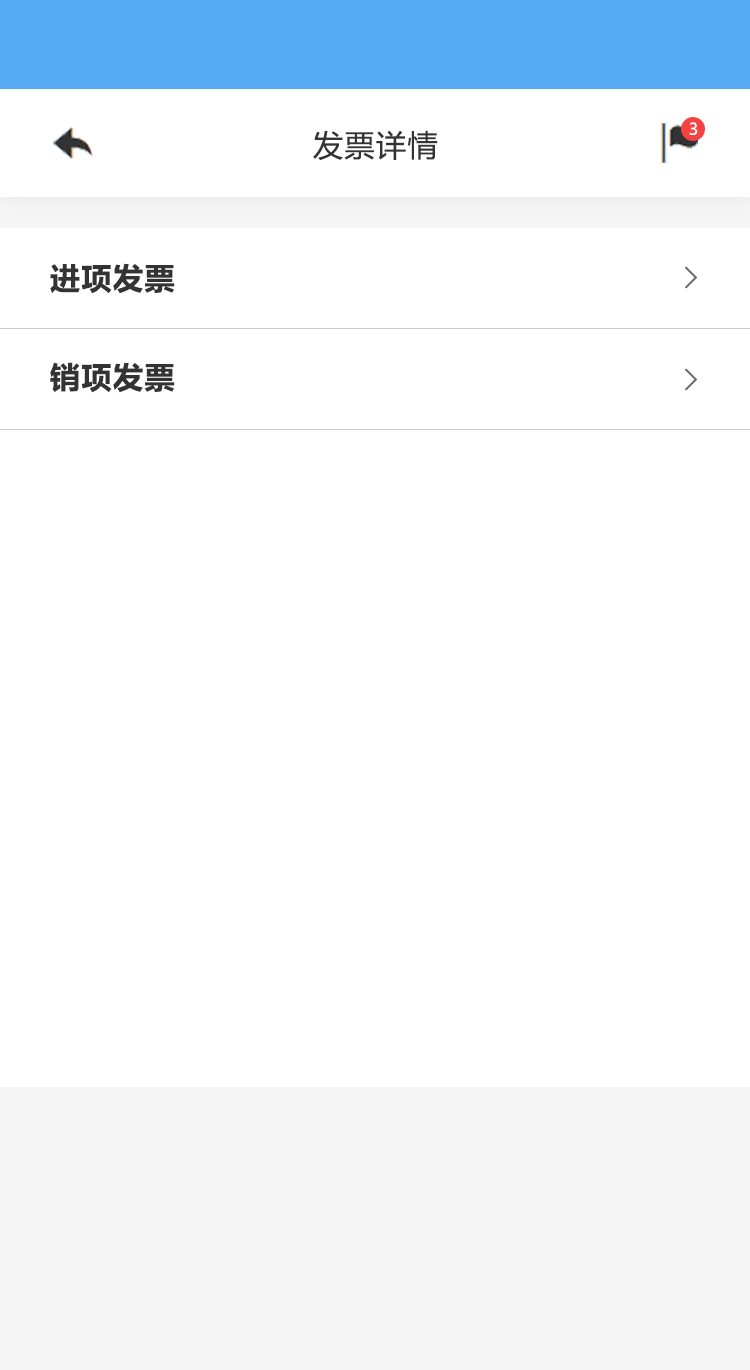
<style>
.page{position:relative;width:750px;height:1370px;background:#ffffff}
.page>*{position:absolute;margin:0}
.t1{font:16px "MicrosoftYaHeiUI";color:#ffffff}
.t2{font:30px "MicrosoftYaHeiUI";letter-spacing:0.05em;color:#333333}
.t3{font:30px "MicrosoftYaHeiUI-Bold";letter-spacing:0.05em;color:#333333}
.t4{font:30px "FangSong";letter-spacing:0.05em;color:#6c6c6c;font-weight:bold}
</style>
<div class="page">
<p class="t1" style="left:689px;top:122px;width:9px;height:13px">3</p>
<p class="t2" style="left:313px;top:130px;width:125px;height:30px">发票详情</p>
<p class="t3" style="left:50px;top:263px;width:125px;height:31px">进项发票</p>
<p class="t4" style="left:685px;top:266px;width:12px;height:23px">&gt;</p>
<p class="t3" style="left:50px;top:362px;width:125px;height:31px">销项发票</p>
<p class="t4" style="left:685px;top:368px;width:12px;height:23px">&gt;</p>
</div>
